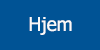
<style>
.page{position:relative;width:100px;height:50px;background:#005395}
.page>*{position:absolute;margin:0}
.t1{font:19px "Tahoma";color:#f9f9f9}
</style>
<div class="page">
<p class="t1" style="left:29px;top:17px;width:43px;height:18px">Hjem</p>
</div>
